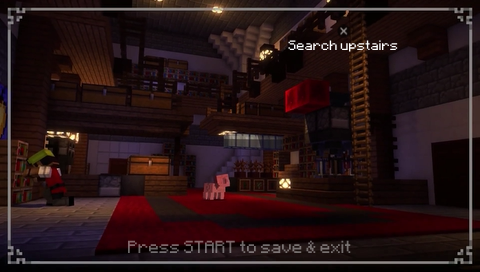
<style>
.page{position:relative;width:480px;height:272px}
.page>*{position:absolute;margin:0}
.t1{font:11px "Minecraft";color:#ffffff}
.t2{font:14px "Minecraft";color:#796d6e}
</style>
<div class="page">
<p class="t1" style="left:288px;top:40px;width:110px;height:12px">Search upstairs</p>
<p class="t2" style="left:128px;top:240px;width:223px;height:13px">Press START to save &amp; exit</p>
</div>
